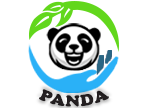
<style>
.page{position:relative;width:144px;height:108px;background:#ffffff}
.page>*{position:absolute;margin:0}
.t1{font:15.2px "CooperBlack";letter-spacing:0.02em;color:#262123}
</style>
<div class="page">
<p class="t1" style="left:39px;top:89px;width:70px;height:18px;rotate:-1deg">PANDA</p>
</div>
